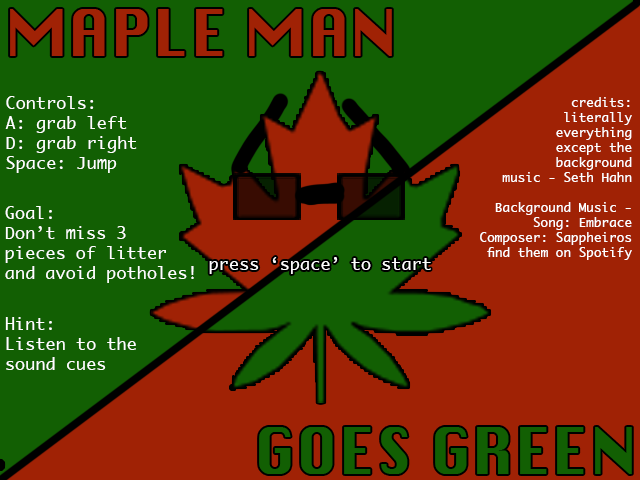
<style>
.page{position:relative;width:640px;height:480px;background:#125f03}
.page>*{position:absolute;margin:0}
.t1{font:62.5px "Silom";letter-spacing:0.01em;color:#a02205}
.t2{font:16.7px "Ayuthaya";letter-spacing:0.01em;color:#ffffff}
.t3{font:12.5px "Ayuthaya";letter-spacing:0.01em;color:#ffffff}
.t4{font:62.5px "Silom";letter-spacing:0.01em;color:#125f03}
</style>
<div class="page">
<p class="t1" style="left:10px;top:9px;width:382px;height:47px">MAPLE MAN</p>
<p class="t2" style="left:5px;top:96px;width:132px;height:77px">Controls:<br>A: grab left<br>D: grab right<br>Space: Jump</p>
<p class="t3" style="left:480px;top:97px;width:152px;height:163px;text-align:right">credits:<br>literally<br>everything<br>except the<br>background<br>music - Seth Hahn<br><br>Background Music -<br>Song: Embrace<br>Composer: Sappheiros<br>find them on Spotify</p>
<p class="t2" style="left:5px;top:206px;width:189px;height:77px">Goal:<br>Don’t miss 3<br>pieces of litter <br>and avoid potholes!</p>
<p class="t2" style="left:209px;top:257px;width:222px;height:17px">press ‘space’ to start</p>
<p class="t2" style="left:5px;top:317px;width:131px;height:53px">Hint:<br>Listen to the<br>sound cues</p>
<p class="t4" style="left:259px;top:427px;width:373px;height:47px">GOES GREEN</p>
</div>
